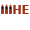
<style>
.page{position:relative;width:30px;height:30px;background:#ffffff}
.page>*{position:absolute;margin:0}
.t1{font:12px "Tahoma-Bold";color:#9e3219}
</style>
<div class="page">
<p class="t1" style="left:13px;top:5px;width:16px;height:9px">HE</p>
</div>
